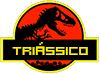
<style>
.page{position:relative;width:100px;height:74px;background:#ffffff}
.page>*{position:absolute;margin:0}
.t1{font:13.3px "Hooge0553";color:#fff500}
</style>
<div class="page">
<p class="t1" style="left:12px;top:42px;width:76px;height:13px">Triássico</p>
</div>
